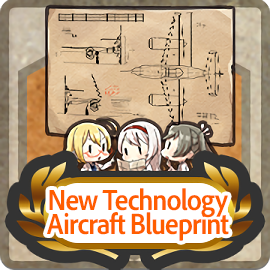
<style>
.page{position:relative;width:270px;height:270px}
.page>*{position:absolute;margin:0}
.t1{font:30px/24px "AdobeClean-Bold";letter-spacing:-0.04em;color:#ff5d00;scale:0.9 1}
</style>
<div class="page">
<p class="t1" style="left:47px;top:188px;width:182px;height:53px;text-align:center">New Technology<br>Aircraft Blueprint</p>
</div>
